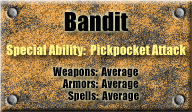
<style>
.page{position:relative;width:192px;height:112px}
.page>*{position:absolute;margin:0}
.t1{font:24px "Impact";color:#000000}
.t2{font:13px "Impact";color:#fff587}
.t3{font:11px "Impact";color:#000000}
</style>
<div class="page">
<p class="t1" style="left:64px;top:12px;width:64px;height:20px">Bandit</p>
<p class="t2" style="left:6px;top:44px;width:180px;height:13px">Special Ability:  Pickpocket Attack</p>
<p class="t3" style="left:53px;top:67px;width:85px;height:11px">Weapons:  Average</p>
<p class="t3" style="left:62px;top:79px;width:77px;height:11px">Armors:  Average</p>
<p class="t3" style="left:68px;top:91px;width:71px;height:11px">Spells:  Average</p>
</div>
